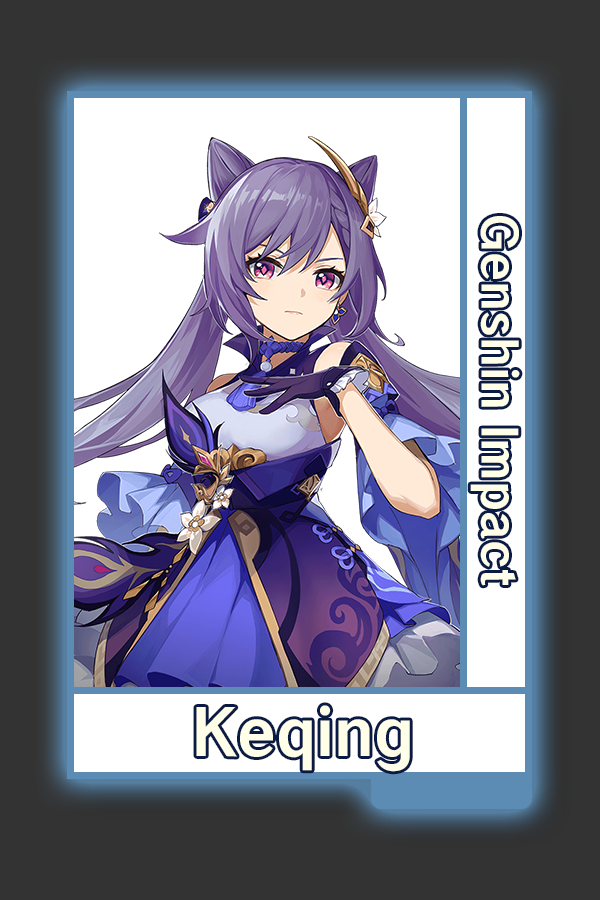
<style>
.page{position:relative;width:600px;height:900px;background:#333333}
.page>*{position:absolute;margin:0}
.t1{font:48.8px "HYWenHei-HEW";color:#fefef4}
.t2{font:65.2px "HYWenHei-HEW";color:#fefef4}
</style>
<div class="page">
<p class="t1" style="left:470px;top:216px;width:50px;height:370px;rotate:90deg">Genshin Impact</p>
<p class="t2" style="left:196px;top:705px;width:214px;height:67px">Keqing</p>
</div>
